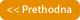
<style>
.page{position:relative;width:80px;height:20px;background:#e68d00}
.page>*{position:absolute;margin:0}
.t1{font:11px "MyriadPro-Semibold";color:#ffffff}
</style>
<div class="page">
<p class="t1" style="left:7px;top:5px;width:65px;height:8px">&lt;&lt; Prethodna</p>
</div>
